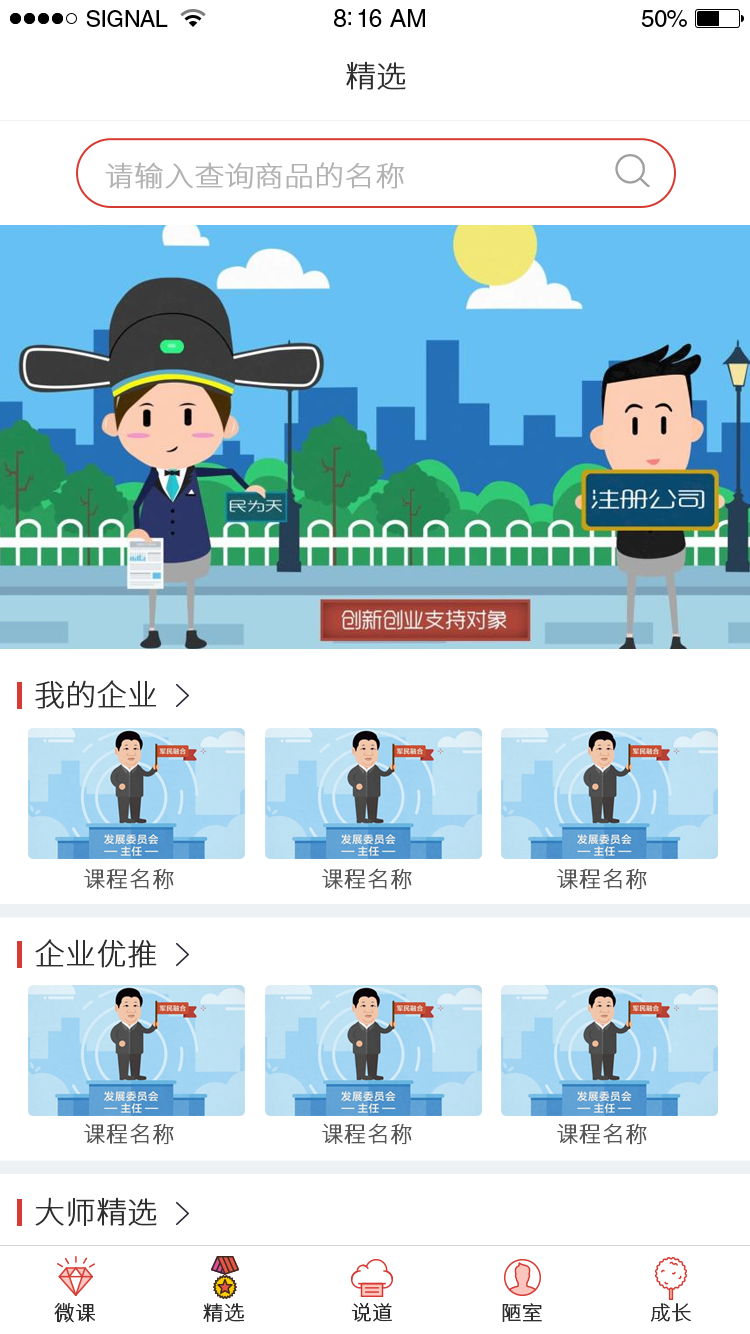
<style>
.page{position:relative;width:750px;height:1334px;background:#ffffff}
.page>*{position:absolute;margin:0}
.t1{font:23px "HelveticaLTStd-Roman";letter-spacing:-0.02em;color:#000000}
.t2{font:25px "HelveticaLTStd-Roman";letter-spacing:-0.02em;color:#000000}
.t3{font:24px "HelveticaLTStd-Roman";letter-spacing:-0.02em;color:#000000}
.t4{font:30px "SourceHanSansCN-ExtraLight";color:#2e2e2e;font-weight:bold}
.t5{font:27.9px "SourceHanSansCN-ExtraLight";color:#b3b3b3;font-weight:bold;scale:1.04 1}
.t6{font:22px "SourceHanSansCN-ExtraLight";color:#595858;font-weight:bold}
.t7{font:20px "SourceHanSansCN-ExtraLight";color:#2e2e2e;font-weight:bold}
</style>
<div class="page">
<p class="t1" style="left:86px;top:10px;width:82px;height:17px">SIGNAL</p>
<p class="t2" style="left:334px;top:9px;width:91px;height:18px">8:16 AM</p>
<p class="t3" style="left:641px;top:10px;width:46px;height:17px">50%</p>
<p class="t4" style="left:346px;top:61px;width:60px;height:29px">精选</p>
<p class="t5" style="left:105px;top:162px;width:299px;height:27px">请输入查询商品的名称</p>
<p class="t4" style="left:35px;top:680px;width:121px;height:29px">我的企业</p>
<p class="t6" style="left:84px;top:868px;width:90px;height:22px">课程名称</p>
<p class="t6" style="left:322px;top:868px;width:90px;height:22px">课程名称</p>
<p class="t6" style="left:557px;top:868px;width:90px;height:22px">课程名称</p>
<p class="t4" style="left:35px;top:939px;width:122px;height:29px">企业优推</p>
<p class="t6" style="left:84px;top:1123px;width:90px;height:22px">课程名称</p>
<p class="t6" style="left:322px;top:1123px;width:90px;height:22px">课程名称</p>
<p class="t6" style="left:557px;top:1123px;width:90px;height:22px">课程名称</p>
<p class="t4" style="left:35px;top:1197px;width:122px;height:29px">大师精选</p>
<p class="t7" style="left:54px;top:1302px;width:41px;height:21px">微课</p>
<p class="t7" style="left:203px;top:1303px;width:41px;height:19px">精选</p>
<p class="t7" style="left:351px;top:1303px;width:41px;height:19px">说道</p>
<p class="t7" style="left:502px;top:1303px;width:40px;height:19px">陋室</p>
<p class="t7" style="left:650px;top:1303px;width:41px;height:19px">成长</p>
</div>
